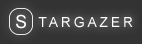
<style>
.page{position:relative;width:142px;height:44px;background:#333333}
.page>*{position:absolute;margin:0}
.t1{font:18px "ArialMT";letter-spacing:0.1em;color:#ffffff}
.t2{font:14px "ArialMT";letter-spacing:0.2em;color:#ffffff}
</style>
<div class="page">
<p class="t1" style="left:16px;top:14px;width:10px;height:15px">S</p>
<p class="t2" style="left:38px;top:16px;width:95px;height:12px">TARGAZER</p>
</div>
